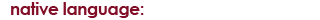
<style>
.page{position:relative;width:320px;height:20px;background:#ffffff}
.page>*{position:absolute;margin:0}
.t1{font:17px "CenturyGothic-Bold";letter-spacing:-0.025em;color:#810d26}
</style>
<div class="page">
<p class="t1" style="left:11px;top:2px;width:133px;height:16px">native language:</p>
</div>
